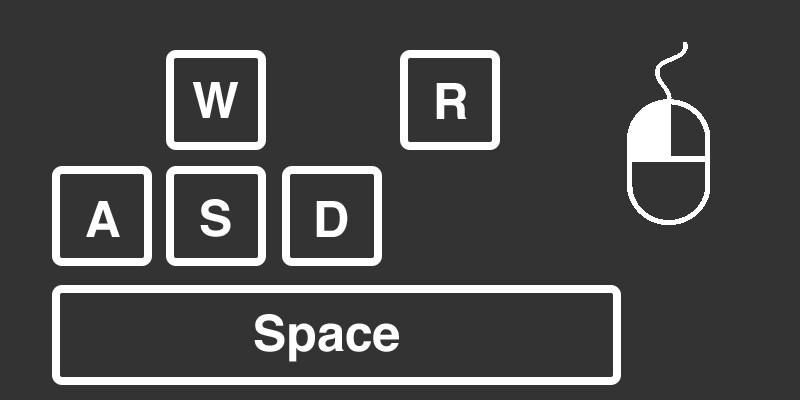
<style>
.page{position:relative;width:800px;height:400px;background:#333333}
.page>*{position:absolute;margin:0}
.t1{font:50px "Helvetica-Bold";color:#ffffff}
</style>
<div class="page">
<p class="t1" style="left:192px;top:82px;width:47px;height:36px">W</p>
<p class="t1" style="left:436px;top:83px;width:31px;height:36px">R</p>
<p class="t1" style="left:86px;top:201px;width:34px;height:36px">A</p>
<p class="t1" style="left:200px;top:199px;width:31px;height:38px">S</p>
<p class="t1" style="left:316px;top:201px;width:32px;height:36px">D</p>
<p class="t1" style="left:254px;top:314px;width:145px;height:48px">Space</p>
</div>
